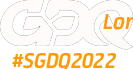
<style>
.page{position:relative;width:133px;height:69px;background:#ffffff}
.page>*{position:absolute;margin:0}
.t1{font:24px "Neuron-Bold";color:#ff9a00;font-style:italic}
</style>
<div class="page">
<p class="t1" style="left:12px;top:53px;width:104px;height:18px">#SGDQ2022</p>
</div>
